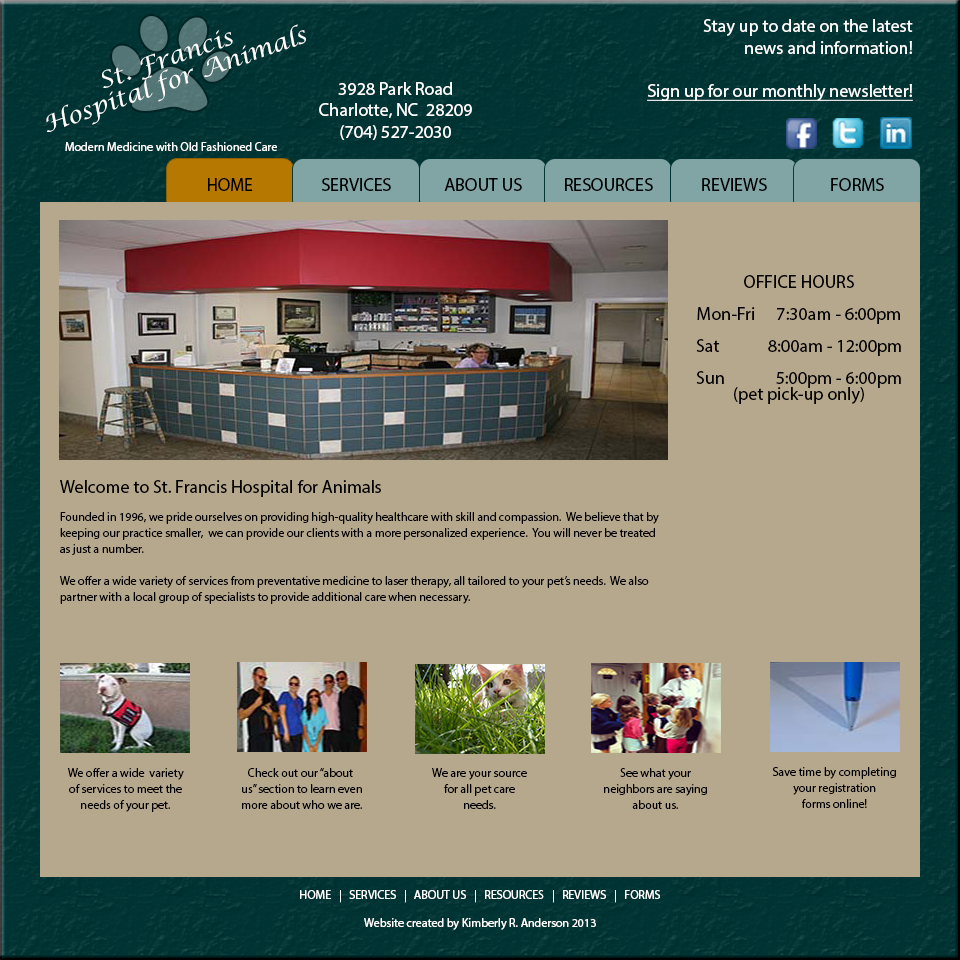
<style>
.page{position:relative;width:960px;height:960px;background:#b6a88d}
.page>*{position:absolute;margin:0}
.t1{font:22.9px/22.9px "LucidaCalligraphy-Italic";color:#ffffff;scale:1.07 1}
.t2{font:18px "MyriadPro-Regular";color:#ffffff}
.t3{font:18px "MyriadPro-Regular";color:#ffffff;text-decoration:underline}
.t4{font:12px "MyriadPro-Regular";color:#ffffff}
.t5{font:18px "MyriadPro-Regular";color:#000000}
.t6{font:18px/16px "MyriadPro-Regular";color:#000000}
.t7{font:12px/16px "MyriadPro-Regular";color:#000000}
</style>
<div class="page">
<p class="t1" style="left:46px;top:24px;width:260px;height:108px;text-align:center;rotate:-19deg">St. Francis<br>Hospital for Animals</p>
<p class="t2" style="left:647px;top:19px;width:266px;height:82px;text-align:right">Stay up to date on the latest<br>news and information!<br><br><span class="t3">Sign up for our monthly newsletter!</span></p>
<p class="t2" style="left:319px;top:82px;width:153px;height:58px;text-align:center">3928 Park Road<br>Charlotte, NC  28209<br>(704) 527-2030</p>
<p class="t4" style="left:65px;top:142px;width:212px;height:9px">Modern Medicine with Old Fashioned Care</p>
<p class="t5" style="left:208px;top:178px;width:45px;height:13px">HOME</p>
<p class="t5" style="left:322px;top:178px;width:69px;height:13px">SERVICES</p>
<p class="t5" style="left:444px;top:178px;width:78px;height:13px">ABOUT US</p>
<p class="t5" style="left:565px;top:178px;width:88px;height:13px">RESOURCES</p>
<p class="t5" style="left:702px;top:178px;width:65px;height:13px">REVIEWS</p>
<p class="t5" style="left:831px;top:178px;width:53px;height:13px">FORMS</p>
<p class="t6" style="left:696px;top:275px;width:205px;height:129px;text-align:center">OFFICE HOURS<br><br>Mon-Fri   7:30am - 6:00pm<br><br>Sat  8:00am - 12:00pm<br><br>Sun    5:00pm - 6:00pm<br>(pet pick-up only)</p>
<p class="t5" style="left:60px;top:480px;width:321px;height:17px">Welcome to St. Francis Hospital for Animals</p>
<p class="t7" style="left:59px;top:512px;width:600px;height:92px">Founded in 1996, we pride ourselves on providing high-quality healthcare with skill and compassion.  We believe that by<br>keeping our practice smaller,  we can provide our clients with a more personalized experience.  You will never be treated<br>as just a number.<br><br>We offer a wide variety of services from preventative medicine to laser therapy, all tailored to your pet’s needs.  We also <br>partner with a local group of specialists to provide additional care when necessary.</p>
<p class="t7" style="left:67px;top:768px;width:117px;height:44px;text-align:center">We offer a wide  variety<br>of services to meet the<br>needs of your pet.</p>
<p class="t7" style="left:242px;top:768px;width:120px;height:41px;text-align:center">Check out our “about <br>us” section to learn even<br>more about who we are.</p>
<p class="t7" style="left:432px;top:768px;width:95px;height:41px;text-align:center">We are your source<br>for all pet care<br>needs.</p>
<p class="t7" style="left:604px;top:768px;width:103px;height:41px;text-align:center">See what your<br>neighbors are saying<br>about us.</p>
<p class="t7" style="left:772px;top:767px;width:124px;height:41px;text-align:center">Save time by completing<br>your registration<br>forms online!</p>
<p class="t4" style="left:300px;top:890px;width:360px;height:13px">HOME   |   SERVICES   |   ABOUT US   |   RESOURCES   |   REVIEWS   |   FORMS</p>
<p class="t4" style="left:364px;top:918px;width:232px;height:12px">Website created by Kimberly R. Anderson 2013</p>
</div>
